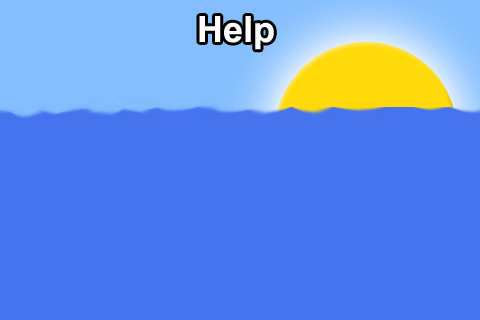
<style>
.page{position:relative;width:480px;height:320px;background:#4673ee}
.page>*{position:absolute;margin:0}
.t1{font:36px "Arial-BoldMT";color:#fefefe}
</style>
<div class="page">
<p class="t1" style="left:199px;top:16px;width:75px;height:34px">Help</p>
</div>
